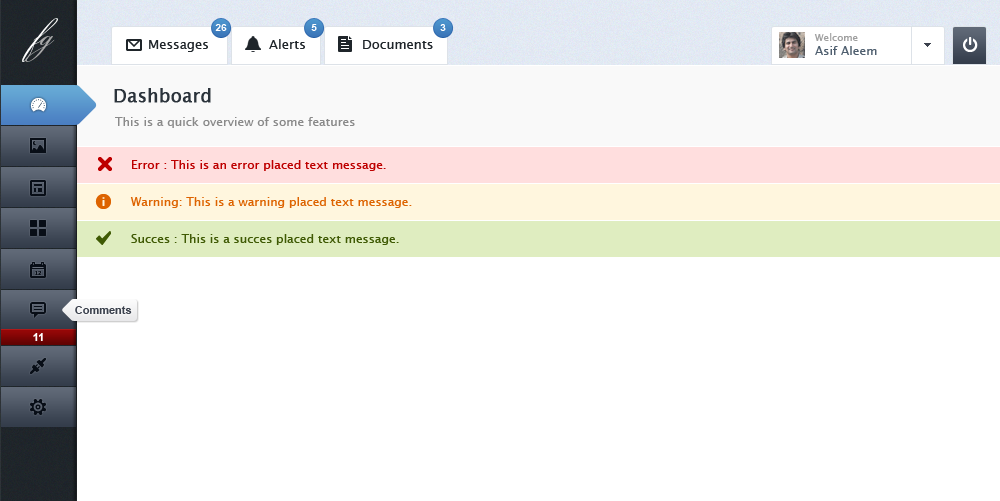
<style>
.page{position:relative;width:1000px;height:501px;background:#ffffff}
.page>*{position:absolute;margin:0}
.t1{font:45px "BickhamScriptPro-Regular";color:#ffffff}
.t2{font:45px "BickhamScriptPro-Regular";color:#a8a8a8}
.t3{font:10px "Arial-BoldMT";color:#ffffff}
.t4{font:13px "LucidaSansUnicode";color:#1f252a}
.t5{font:10px "LucidaSansUnicode";color:#a0a0a0}
.t6{font:12px "LucidaSansUnicode";color:#4f5f6f}
.t7{font:18px "LucidaSansUnicode";color:#2b333b;font-weight:bold}
.t8{font:12px "LucidaSansUnicode";color:#8a8a8a}
.t9{font:12px "LucidaSansUnicode";color:#be0000}
.t10{font:12px "LucidaSansUnicode";color:#dc6200}
.t11{font:12px "LucidaSansUnicode";color:#3f5a04}
.t12{font:11px "Arial-BoldMT";color:#3b414d}
.t13{font:11px "Arial-BoldMT";color:#ffffff}
</style>
<div class="page">
<p class="t1" style="left:22px;top:18px;width:36px;height:44px">f<span class="t2">g</span></p>
<p class="t3" style="left:215px;top:24px;width:12px;height:7px">26</p>
<p class="t3" style="left:311px;top:24px;width:6px;height:7px">5</p>
<p class="t3" style="left:440px;top:24px;width:6px;height:7px">3</p>
<p class="t4" style="left:149px;top:40px;width:59px;height:12px">Messages</p>
<p class="t4" style="left:269px;top:39px;width:36px;height:10px">Alerts</p>
<p class="t4" style="left:363px;top:40px;width:70px;height:9px">Documents</p>
<p class="t5" style="left:814px;top:33px;width:44px;height:8px">Welcome</p>
<p class="t6" style="left:815px;top:46px;width:62px;height:9px">Asif Aleem</p>
<p class="t7" style="left:114px;top:88px;width:97px;height:15px">Dashboard</p>
<p class="t8" style="left:115px;top:117px;width:240px;height:11px">This is a quick overview of some features</p>
<p class="t9" style="left:132px;top:160px;width:254px;height:11px">Error : This is an error placed text message.</p>
<p class="t10" style="left:130px;top:197px;width:282px;height:11px">Warning: This is a warning placed text message.</p>
<p class="t11" style="left:131px;top:234px;width:268px;height:11px">Succes : This is a succes placed text message.</p>
<p class="t12" style="left:75px;top:306px;width:57px;height:8px">Comments</p>
<p class="t13" style="left:33px;top:333px;width:10px;height:8px">11</p>
</div>
